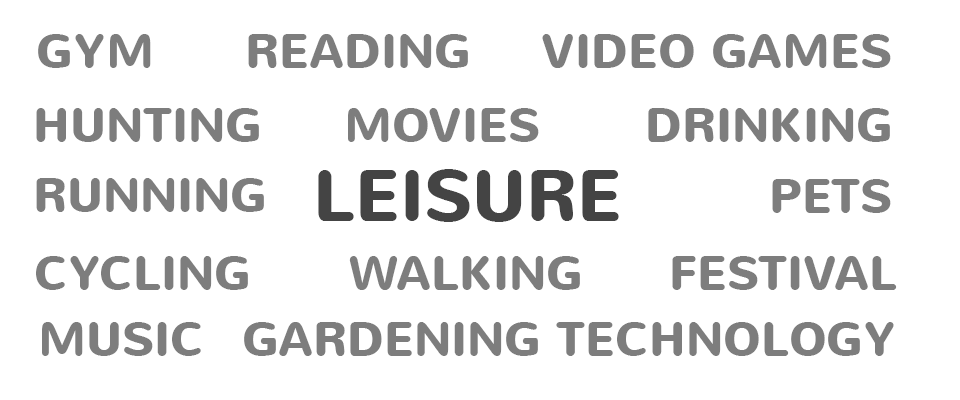
<style>
.page{position:relative;width:960px;height:400px;background:#ffffff}
.page>*{position:absolute;margin:0}
.t1{font:48px "Nunito-Bold";color:#7d7d7d;text-transform:uppercase}
.t2{font:72px "Nunito-Bold";color:#444444;text-transform:uppercase}
</style>
<div class="page">
<p class="t1" style="left:38px;top:34px;width:113px;height:34px">Gym</p>
<p class="t1" style="left:248px;top:34px;width:220px;height:34px">reading</p>
<p class="t1" style="left:542px;top:34px;width:349px;height:34px">video games</p>
<p class="t1" style="left:36px;top:108px;width:223px;height:34px">hunting</p>
<p class="t1" style="left:348px;top:108px;width:191px;height:34px">Movies</p>
<p class="t1" style="left:648px;top:108px;width:242px;height:34px">drinking</p>
<p class="t2" style="left:318px;top:169px;width:301px;height:53px">Leisure</p>
<p class="t1" style="left:36px;top:178px;width:228px;height:34px">running</p>
<p class="t1" style="left:772px;top:179px;width:119px;height:34px">pets</p>
<p class="t1" style="left:36px;top:256px;width:212px;height:34px">cycling</p>
<p class="t1" style="left:349px;top:256px;width:231px;height:34px">walking</p>
<p class="t1" style="left:672px;top:256px;width:225px;height:34px">festival</p>
<p class="t1" style="left:42px;top:322px;width:159px;height:34px">music</p>
<p class="t1" style="left:244px;top:322px;width:294px;height:34px">gardening</p>
<p class="t1" style="left:556px;top:322px;width:338px;height:34px">technology</p>
</div>
